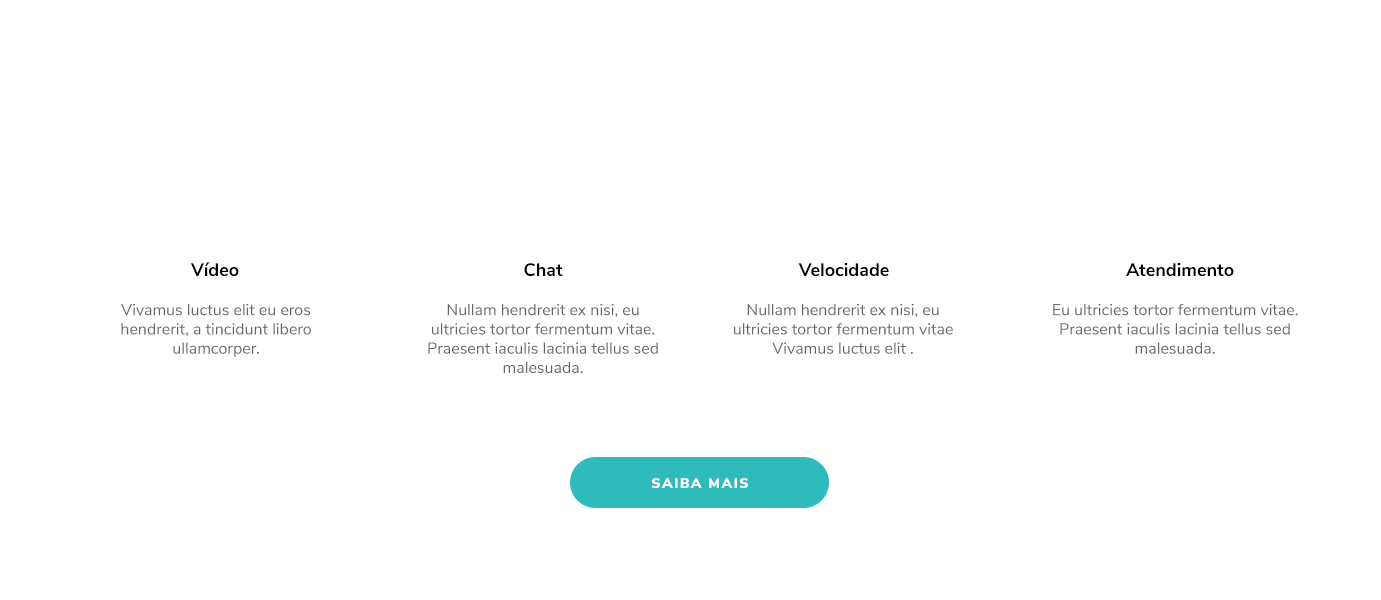
<style>
.page{position:relative;width:1381px;height:600px;background:#ffffff}
.page>*{position:absolute;margin:0}
.t1{font:18px "NunitoSans-Bold";color:#000000}
.t2{font:16px "NunitoSans-Regular";color:#666666}
.t3{font:14px "NunitoSans-Black";letter-spacing:0.1em;color:#ffffff}
</style>
<div class="page">
<p class="t1" style="left:190px;top:262px;width:49px;height:15px">Vídeo</p>
<p class="t1" style="left:524px;top:263px;width:39px;height:14px">Chat</p>
<p class="t1" style="left:798px;top:263px;width:91px;height:14px">Velocidade</p>
<p class="t1" style="left:1126px;top:263px;width:108px;height:14px">Atendimento</p>
<p class="t2" style="left:121px;top:304px;width:190px;height:53px;text-align:center">Vivamus luctus elit eu eros hendrerit, a tincidunt libero ullamcorper.</p>
<p class="t2" style="left:428px;top:304px;width:230px;height:69px;text-align:center">Nullam hendrerit ex nisi, eu ultricies tortor fermentum vitae. Praesent iaculis lacinia tellus sed malesuada.</p>
<p class="t2" style="left:734px;top:304px;width:219px;height:50px;text-align:center">Nullam hendrerit ex nisi, eu ultricies tortor fermentum vitae Vivamus luctus elit .</p>
<p class="t2" style="left:1053px;top:304px;width:245px;height:50px;text-align:center">Eu ultricies tortor fermentum vitae. Praesent iaculis lacinia tellus sed malesuada.</p>
<p class="t3" style="left:651px;top:478px;width:97px;height:11px">SAIBA MAIS</p>
</div>
